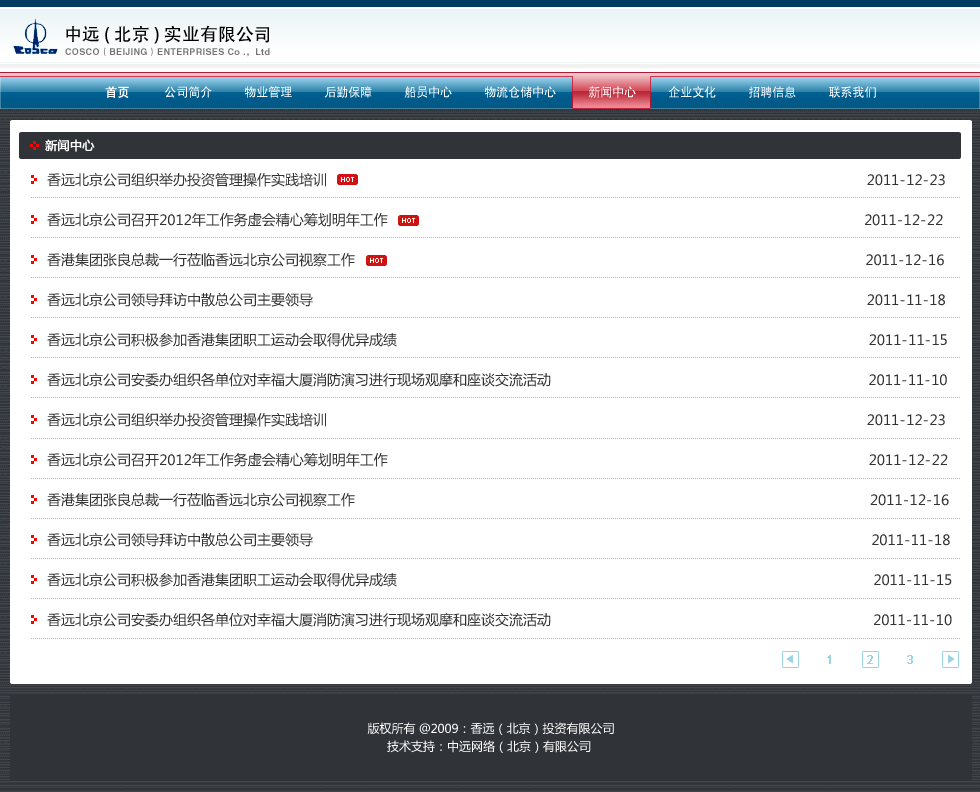
<style>
.page{position:relative;width:980px;height:792px;background:#ffffff}
.page>*{position:absolute;margin:0}
.t1{font:18px "AdobeHeitiStd-Regular";color:#000000}
.t2{font:9px "HelveticaLTStd-Bold";letter-spacing:0.04em;color:#747373}
.t3{font:9px "FZDHTJW--GB1-0";letter-spacing:0.04em;color:#747373}
.t4{font:12px "SIL-Hei-Med-Jian";color:#ffffff}
.t5{font:12px "SIL-Hei-Med-Jian";color:#ffffff;font-weight:bold}
.t6{font:12px "MicrosoftYaHei";color:#ffffff;font-weight:bold}
.t7{font:14px/40px "MicrosoftYaHei";color:#333333}
.t8{font:12px "ArialMT";color:#9dd3e2;font-weight:bold}
.t9{font:12px/18px "MicrosoftYaHei";color:#ffffff}
</style>
<div class="page">
<p class="t1" style="left:66px;top:25px;width:203px;height:19px">中远 ( 北京 ) 实业有限公司</p>
<p class="t2" style="left:65px;top:47px;width:205px;height:10px">COSCO<span class="t3">（</span>BEIJING<span class="t3">）</span>ENTERPRISES Co .<span class="t3">，</span>Ltd</p>
<p class="t4" style="left:105px;top:86px;width:771px;height:12px"><span class="t5">首页        </span>公司简介        物业管理        后勤保障        船员中心        物流仓储中心        新闻中心        企业文化        招聘信息        联系我们</p>
<p class="t6" style="left:45px;top:139px;width:50px;height:13px">新闻中心</p>
<p class="t7" style="left:47px;top:172px;width:905px;height:455px">香远北京公司组织举办投资管理操作实践培训                                                                                                                   2011-12-23<br>香远北京公司召开2012年工作务虚会精心筹划明年工作                                                                                                   2011-12-22<br>香港集团张良总裁一行莅临香远北京公司视察工作                                                                                                           2011-12-16<br>香远北京公司领导拜访中散总公司主要领导                                                                                                                   2011-11-18<br>香远北京公司积极参加香港集团职工运动会取得优异成绩                                                                                                    2011-11-15<br>香远北京公司安委办组织各单位对幸福大厦消防演习进行现场观摩和座谈交流活动                                                       2011-11-10<br>香远北京公司组织举办投资管理操作实践培训                                                                                                                   2011-12-23<br>香远北京公司召开2012年工作务虚会精心筹划明年工作                                                                                                    2011-12-22<br>香港集团张良总裁一行莅临香远北京公司视察工作                                                                                                            2011-12-16<br>香远北京公司领导拜访中散总公司主要领导                                                                                                                    2011-11-18<br>香远北京公司积极参加香港集团职工运动会取得优异成绩                                                                                                     2011-11-15<br>香远北京公司安委办组织各单位对幸福大厦消防演习进行现场观摩和座谈交流活动                                                        2011-11-10</p>
<p class="t8" style="left:827px;top:655px;width:86px;height:9px">1        2        3</p>
<p class="t9" style="left:367px;top:722px;width:247px;height:31px;text-align:center">版权所有 @2009：香远（北京）投资有限公司<br>技术支持：中远网络（北京）有限公司</p>
</div>
